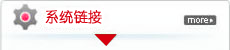
<style>
.page{position:relative;width:230px;height:50px}
.page>*{position:absolute;margin:0}
.t1{font:14px "YouYuan";color:#d7000f;font-weight:bold}
</style>
<div class="page">
<p class="t1" style="left:45px;top:10px;width:57px;height:14px">系统链接</p>
</div>
